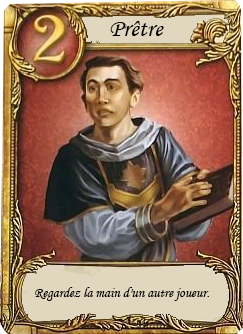
<style>
.page{position:relative;width:243px;height:334px}
.page>*{position:absolute;margin:0}
.t1{font:25px "MonotypeCorsiva";color:#000000}
.t2{font:14px "MonotypeCorsiva";color:#000000}
</style>
<div class="page">
<p class="t1" style="left:110px;top:21px;width:54px;height:15px">Prêtre</p>
<p class="t2" style="left:35px;top:287px;width:174px;height:14px">Regardez la main d'un autre joueur.</p>
</div>
